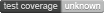
<style>
.page{position:relative;width:104px;height:13px}
.page>*{position:absolute;margin:0}
.t1{font:10px "ArialMT";color:#cccccc;scale:0.9 1}
.t2{font:10px "ArialMT";color:#ffffff;scale:0.9 1}
</style>
<div class="page">
<p class="t1" style="left:3px;top:2px;width:55px;height:9px">test coverage</p>
<p class="t2" style="left:65px;top:2px;width:36px;height:7px">unknown</p>
</div>
